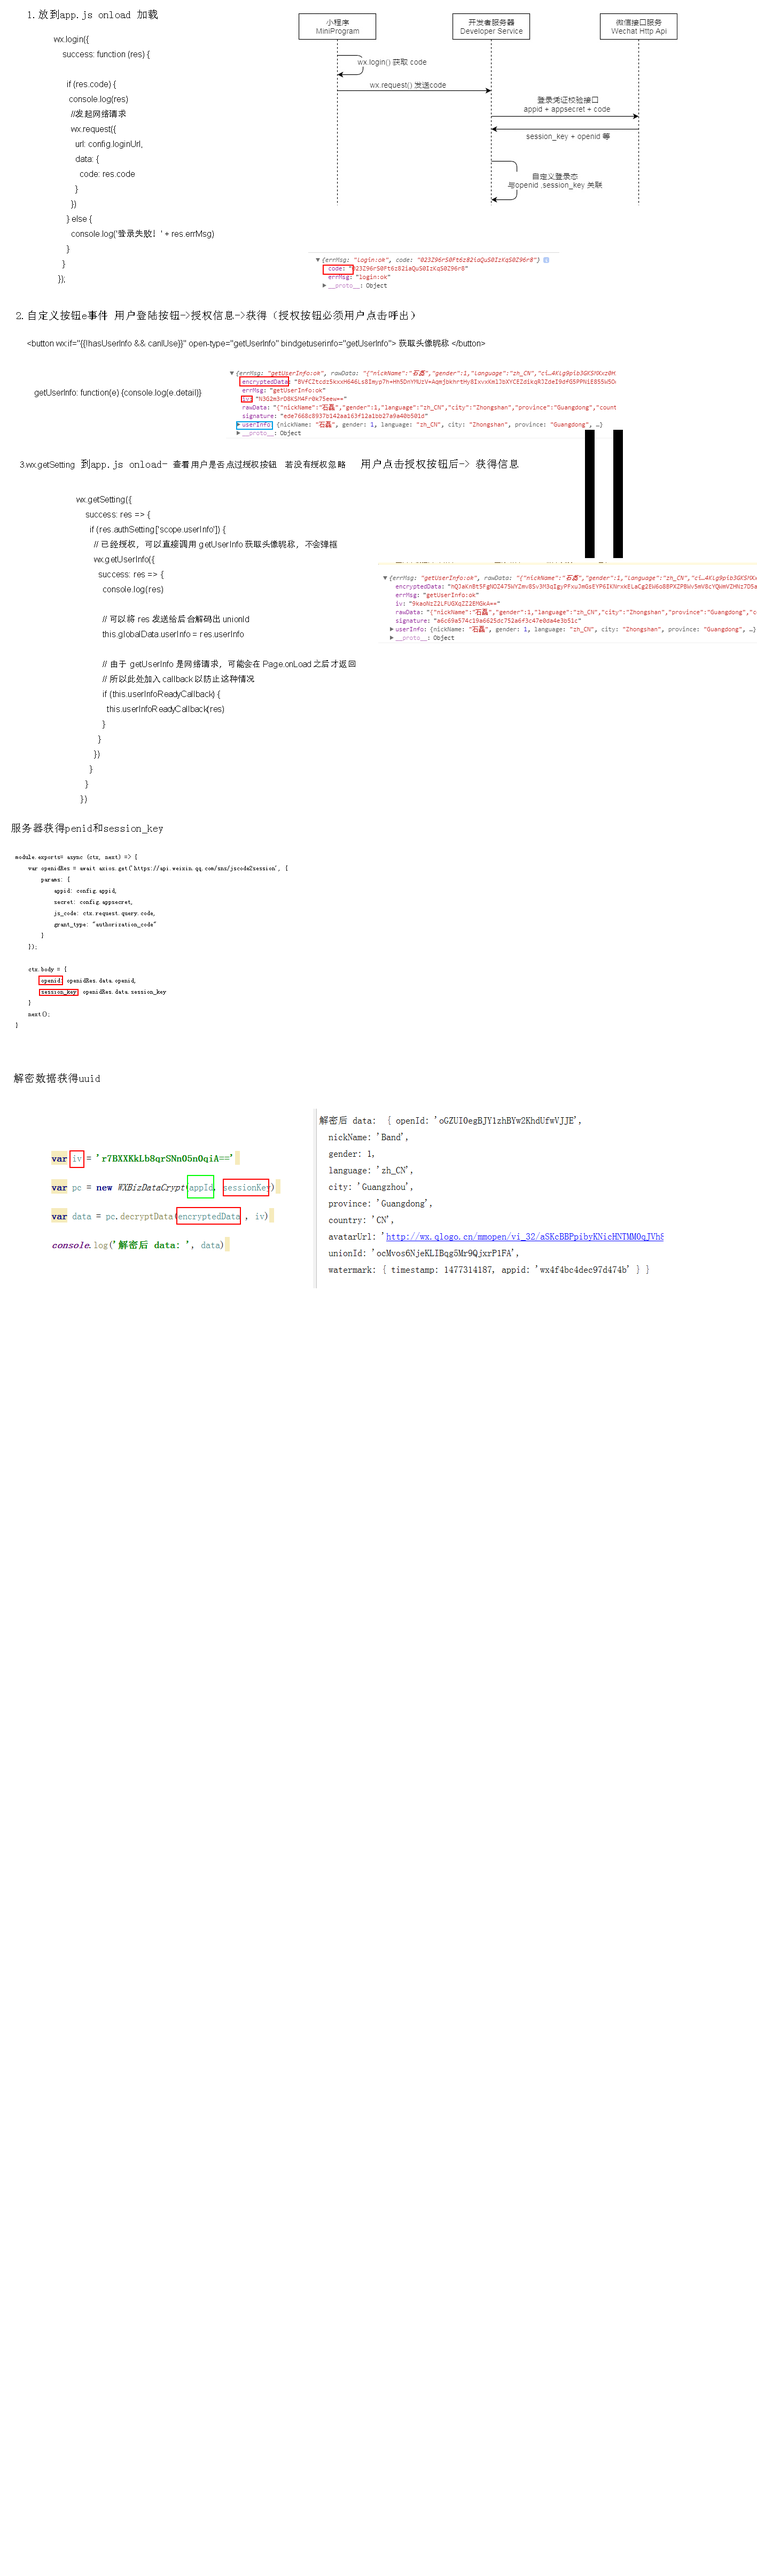
<style>
.page{position:relative;width:757px;height:2576px;background:#ffffff}
.page>*{position:absolute;margin:0}
.t1{font:10.7px "SimSun";color:#000000}
.t2{font:8.6px "ArialMT";color:#000000}
.t3{font:8.6px "AdobeHeitiStd-Regular";color:#000000}
.t4{font:112.9px "AdobeHeitiStd-Regular";color:#000000}
.t5{font:6.4px "SimSun";color:#000000}
</style>
<div class="page">
<p class="t1" style="left:28px;top:10px;width:130px;height:10px">1.放到app.js onload 加载</p>
<p class="t2" style="left:54px;top:36px;width:160px;height:247px">wx.login({<br>      success: function (res) {<br>      <br>        if (res.code) {<br>         console.log(res)<br>          //<span class="t3">发起网络请求</span><br>          wx.request({<br>            url: config.loginUrl,<br>            data: {<br>              code: res.code<br>            }<br>          })<br>        } else {<br>          console.log('<span class="t3">登录失败！</span>' + res.errMsg)<br>        }<br>      }<br>    });</p>
<p class="t1" style="left:17px;top:311px;width:398px;height:9px">2.自定义按钮e事件 用户登陆按钮-&gt;授权信息-&gt;获得（授权按钮必须用户点击呼出）</p>
<p class="t2" style="left:27px;top:339px;width:458px;height:9px">&lt;button wx:if="{{!hasUserInfo &amp;&amp; canIUse}}" open-type="getUserInfo" bindgetuserinfo="getUserInfo"&gt; <span class="t3">获取头像昵称</span> &lt;/button&gt;</p>
<p class="t2" style="left:35px;top:389px;width:167px;height:8px">getUserInfo: function(e) {console.log(e.detail)}</p>
<p class="t4" style="left:585px;top:430px;width:38px;height:128px">||</p>
<p class="t3" style="left:20px;top:459px;width:499px;height:10px"><span class="t2">3.wx.getSetting  </span><span class="t1">到app.js onload- </span>查看用户是否点过授权按钮    若没有授权忽略     <span class="t1"> 用户点击授权按钮后-&gt; 获得信息</span></p>
<p class="t2" style="left:76px;top:496px;width:279px;height:307px">wx.getSetting({<br>      success: res =&gt; {<br>        if (res.authSetting['scope.userInfo']) {<br>          // <span class="t3">已经授权，可以直接调用</span> getUserInfo <span class="t3">获取头像昵称，不会弹框</span><br>          wx.getUserInfo({<br>            success: res =&gt; {<br>              console.log(res)<br>             <br>              // <span class="t3">可以将</span> res <span class="t3">发送给后台解码出</span> unionId<br>              this.globalData.userInfo = res.userInfo<br><br>              // <span class="t3">由于</span> getUserInfo <span class="t3">是网络请求，可能会在</span> Page.onLoad <span class="t3">之后才返回</span><br>              // <span class="t3">所以此处加入</span> callback <span class="t3">以防止这种情况</span><br>              if (this.userInfoReadyCallback) {<br>                this.userInfoReadyCallback(res)<br>              }<br>            }<br>          })<br>        }<br>      }<br>    })</p>
<p class="t1" style="left:11px;top:823px;width:152px;height:10px">服务器获得penid和session_key</p>
<p class="t5" style="left:16px;top:854px;width:272px;height:174px">module.exports= async (ctx, next) =&gt; {<br>    var openidRes = await axios.get('https://api.weixin.qq.com/sns/jscode2session', {<br>        params: {<br>            appid: config.appid,<br>            secret: config.appsecret,<br>            js_code: ctx.request.query.code,<br>            grant_type: "authorization_code"<br>        }<br>    });<br><br>    ctx.body = {<br>        openid: openidRes.data.openid,<br>        session_key: openidRes.data.session_key<br>    }<br>    next();<br>}</p>
<p class="t1" style="left:14px;top:1073px;width:86px;height:10px">解密数据获得uuid</p>
</div>
